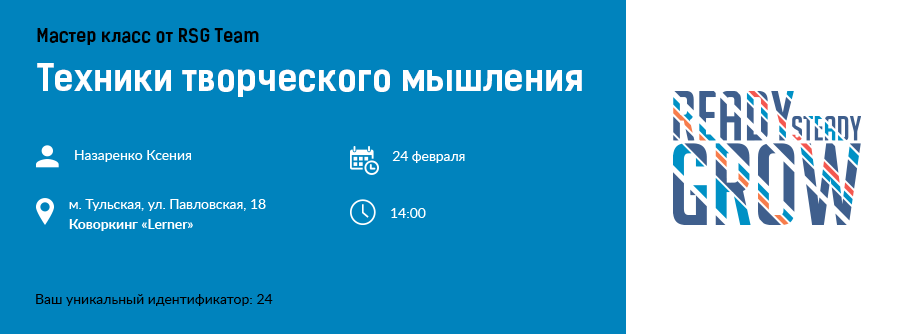
<style>
.page{position:relative;width:900px;height:334px;background:#0083bd}
.page>*{position:absolute;margin:0}
.t1{font:18px "KelsonSans-BoldRU";color:#000000}
.t2{font:36px "KelsonSans-BoldRU";color:#ffffff}
.t3{font:14px "Lato-Regular";color:#ffffff}
.t4{font:14px "Lato-Bold";color:#ffffff}
.t5{font:14px "Lato-Regular";color:#000000}
</style>
<div class="page">
<p class="t1" style="left:37px;top:28px;width:222px;height:17px">Мастер класс от RSG Team</p>
<p class="t2" style="left:37px;top:63px;width:545px;height:34px">Техники творческого мышления</p>
<p class="t3" style="left:75px;top:150px;width:116px;height:12px">Назаренко Ксения</p>
<p class="t3" style="left:392px;top:151px;width:73px;height:12px">24 февраля</p>
<p class="t3" style="left:69px;top:199px;width:197px;height:12px">м. Тульская, ул. Павловская, 18</p>
<p class="t3" style="left:391px;top:208px;width:35px;height:10px">14:00</p>
<p class="t4" style="left:69px;top:219px;width:124px;height:12px">Коворкинг «Lerner»</p>
<p class="t5" style="left:36px;top:294px;width:237px;height:12px">Ваш уникальный идентификатор: 24</p>
</div>
